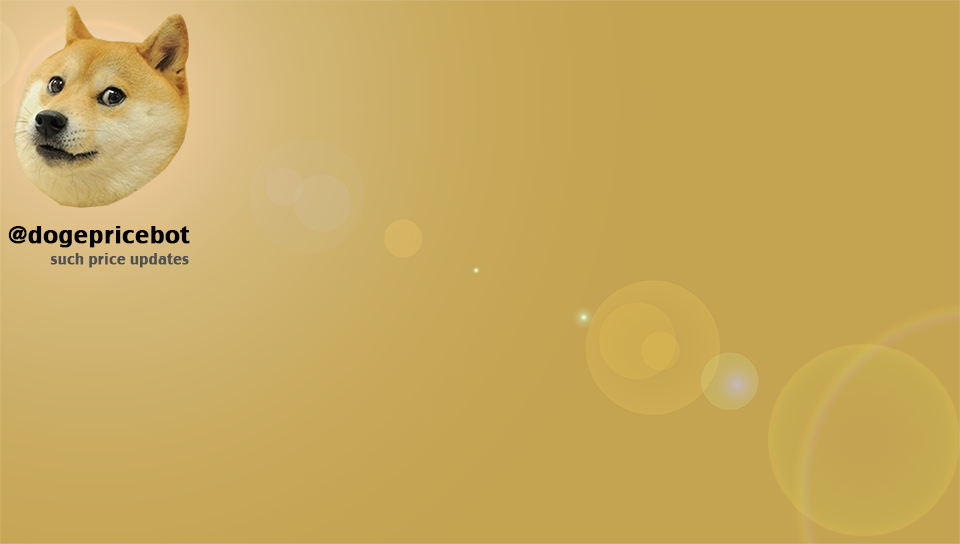
<style>
.page{position:relative;width:960px;height:544px;background:#c4a451}
.page>*{position:absolute;margin:0}
.t1{font:23.1px "CharcoalCY";color:#000000;font-weight:bold}
.t2{font:14.2px "CharcoalCY";color:#505050;font-weight:bold}
</style>
<div class="page">
<p class="t1" style="left:8px;top:226px;width:182px;height:22px">@dogepricebot</p>
<p class="t2" style="left:50px;top:253px;width:139px;height:15px">such price updates</p>
</div>
